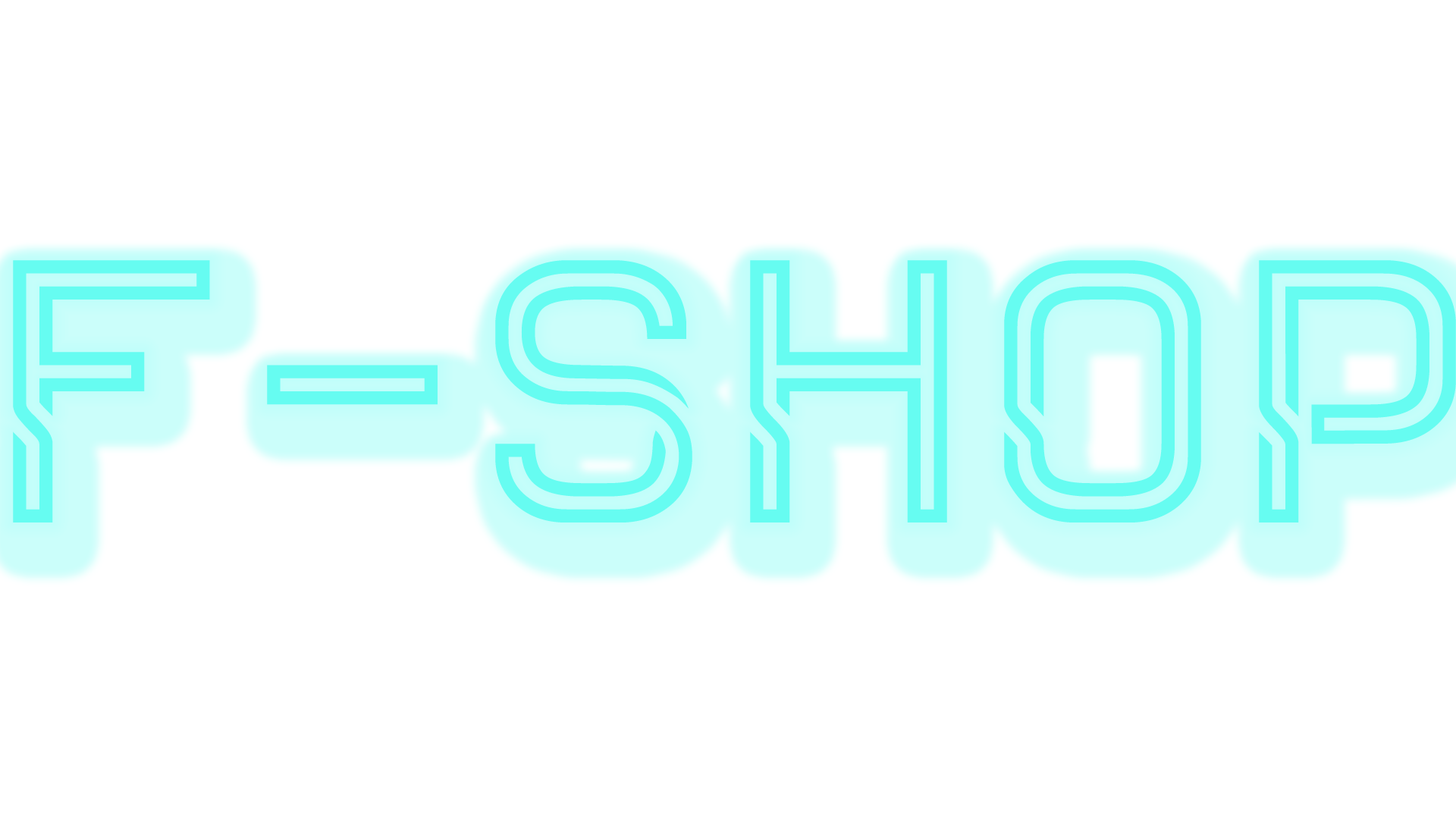
<style>
.page{position:relative;width:1456px;height:819px;background:#ffffff}
.page>*{position:absolute;margin:0}
.t1{font:314.8px "Sportrop-Regular";letter-spacing:0.1em;color:#66fcf1}
</style>
<div class="page">
<p class="t1" style="left:13px;top:260px;width:1443px;height:262px">F-SHOP</p>
</div>
